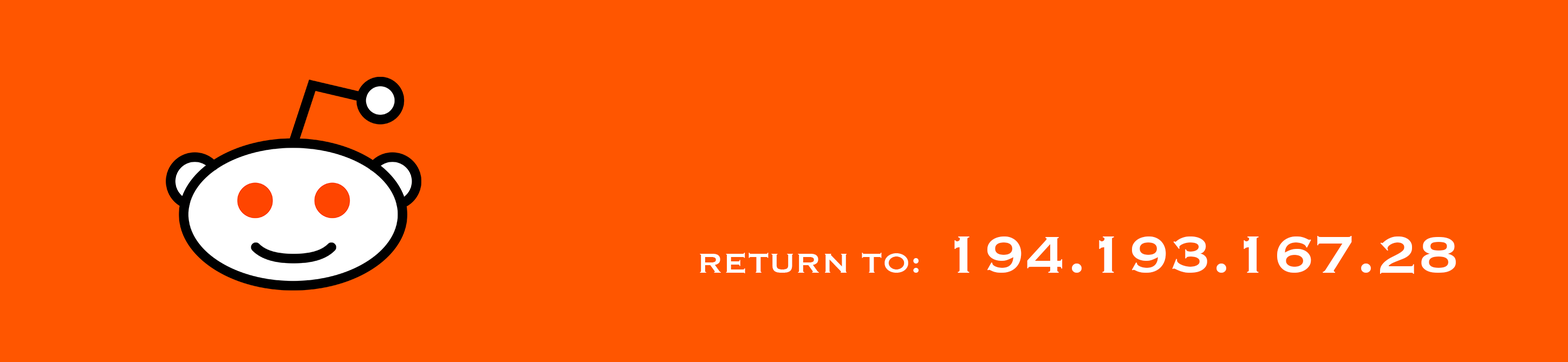
<style>
.page{position:relative;width:1568px;height:362px;background:#ff5600}
.page>*{position:absolute;margin:0}
.t1{font:67.7px "Copperplate";color:#ffffff}
.t2{font:36.1px "Copperplate";color:#ffffff}
</style>
<div class="page">
<p class="t1" style="left:700px;top:236px;width:756px;height:38px"><span class="t2">RETURN TO:</span> 194.193.167.28</p>
</div>
